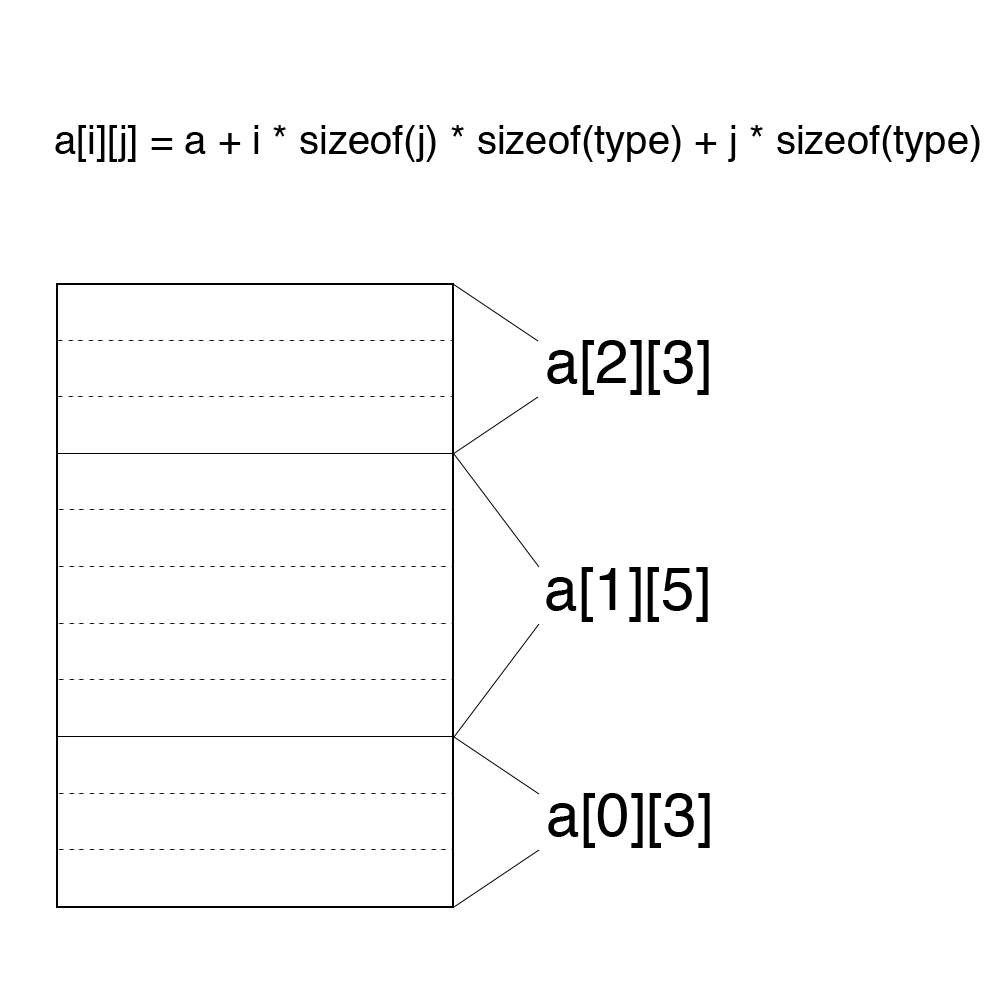
<style>
.page{position:relative;width:1000px;height:1000px;background:#ffffff}
.page>*{position:absolute;margin:0}
.t1{font:40px "Helvetica";color:#000000}
.t2{font:60px "Helvetica";color:#000000}
</style>
<div class="page">
<p class="t1" style="left:55px;top:125px;width:925px;height:37px">a[i][j] = a + i * sizeof(j) * sizeof(type) + j * sizeof(type)</p>
<p class="t2" style="left:547px;top:340px;width:162px;height:55px">a[2][3]</p>
<p class="t2" style="left:546px;top:567px;width:162px;height:55px">a[1][5]</p>
<p class="t2" style="left:548px;top:793px;width:162px;height:55px">a[0][3]</p>
</div>
